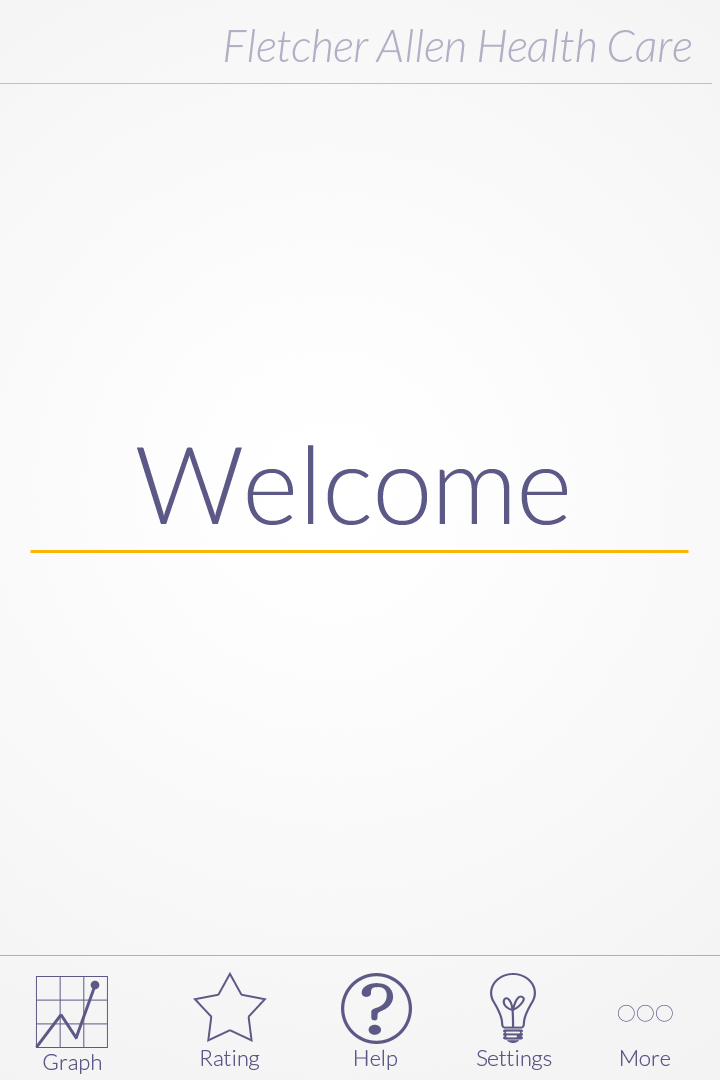
<style>
.page{position:relative;width:720px;height:1080px}
.page>*{position:absolute;margin:0}
.t1{font:45px "Lato-LightItalic";color:#b1b0c5}
.t2{font:108px "Lato-Light";color:#5c5987}
.t3{font:22px "Lato-Light";color:#5c5987}
</style>
<div class="page">
<p class="t1" style="left:225px;top:29px;width:466px;height:33px">Fletcher Allen Health Care</p>
<p class="t2" style="left:137px;top:445px;width:430px;height:80px">Welcome</p>
<p class="t3" style="left:355px;top:1049px;width:42px;height:21px">Help</p>
<p class="t3" style="left:43px;top:1054px;width:58px;height:20px">Graph</p>
<p class="t3" style="left:201px;top:1050px;width:59px;height:20px">Rating</p>
<p class="t3" style="left:477px;top:1050px;width:75px;height:20px">Settings</p>
<p class="t3" style="left:621px;top:1050px;width:49px;height:16px">More</p>
</div>
